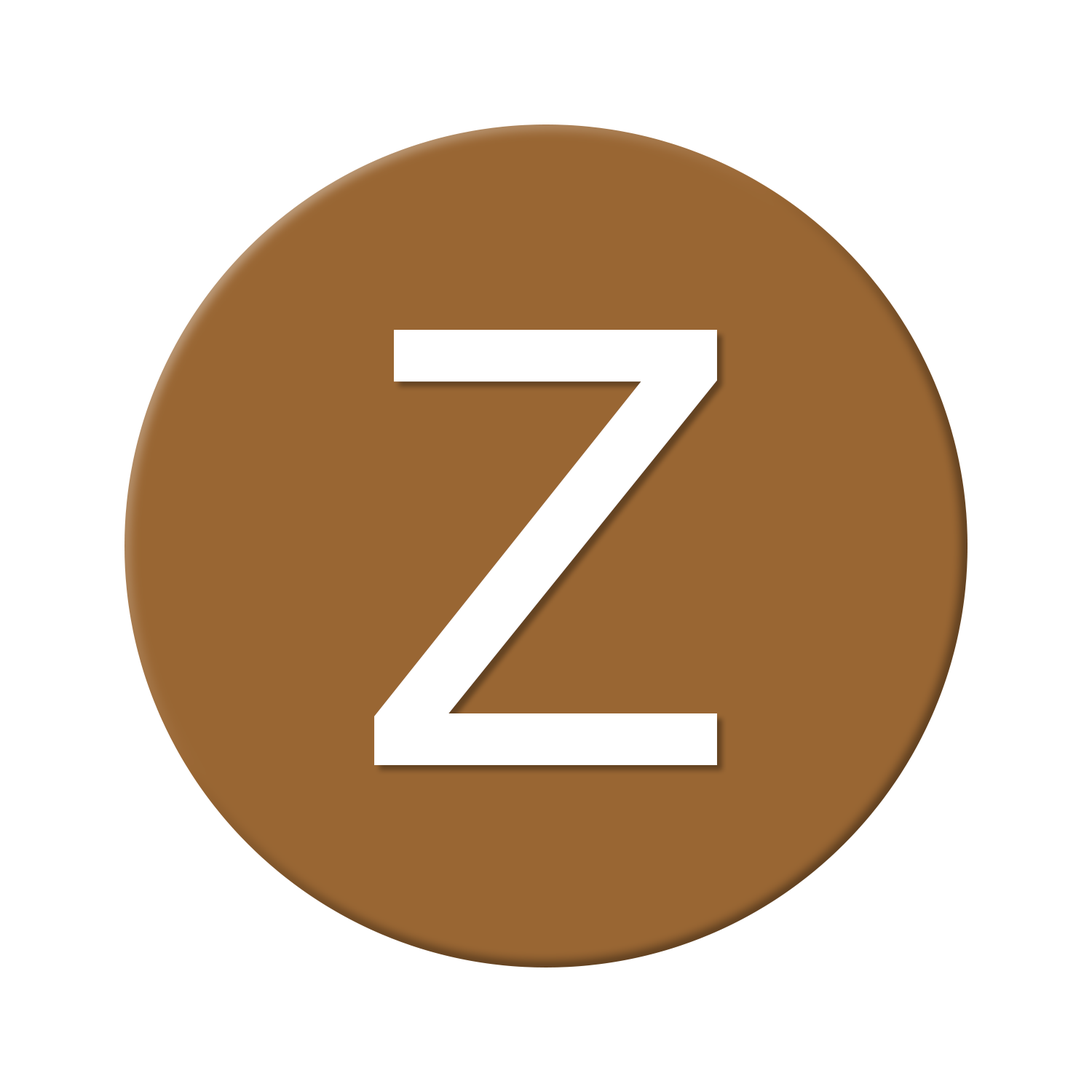
<style>
.page{position:relative;width:1092px;height:1092px;background:#ffffff}
.page>*{position:absolute;margin:0}
.t1{font:606.7px "Helvetica";color:#ffffff}
</style>
<div class="page">
<p class="t1" style="left:374px;top:330px;width:343px;height:435px">Z</p>
</div>
